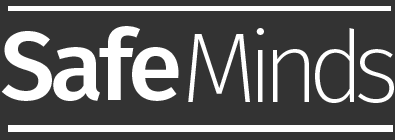
<style>
.page{position:relative;width:395px;height:140px;background:#333333}
.page>*{position:absolute;margin:0}
.t1{font:99px "FiraSans-Medium";letter-spacing:-0.05em;color:#ffffff}
.t2{font:99px "FiraSans-ExtraLight";letter-spacing:-0.11em;color:#ffffff}
.t3{font:99px "FiraSans-ExtraLight";letter-spacing:0.03em;color:#ffffff}
</style>
<div class="page">
<p class="t1" style="left:1px;top:26px;width:178px;height:75px">Safe</p>
<p class="t2" style="left:188px;top:28px;width:206px;height:75px">Mind<span class="t3">s</span></p>
</div>
